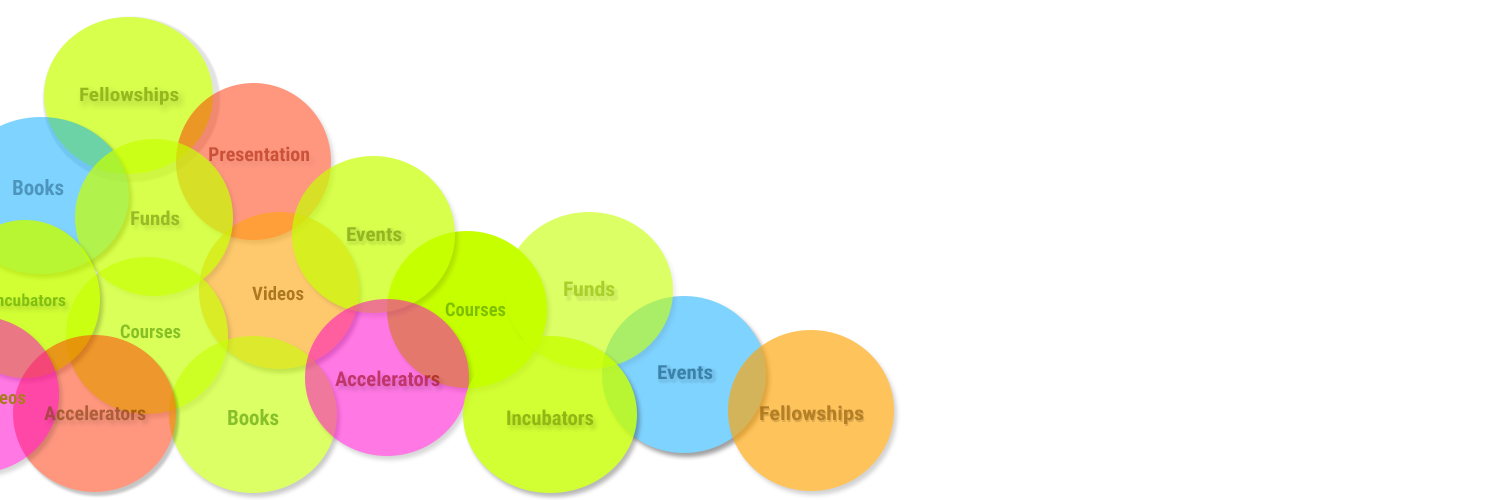
<style>
.page{position:relative;width:1500px;height:500px;background:#ffffff}
.page>*{position:absolute;margin:0}
.t1{font:18.6px "RobotoCondensed-Bold";color:#96b81d;scale:1.14 1}
.t2{font:19.5px "RobotoCondensed-Bold";color:#cc5139}
.t3{font:21.3px "RobotoCondensed-Bold";color:#4c95bc}
.t4{font:19.3px "RobotoCondensed-Bold";color:#99bb25;scale:1.08 1}
.t5{font:19.5px "RobotoCondensed-Bold";color:#94b620;scale:1.08 1}
.t6{font:20.2px "RobotoCondensed-Bold";color:#a9cf2b;scale:1.07 1}
.t7{font:18.6px "RobotoCondensed-Bold";color:#ad7920}
.t8{font:18.6px "RobotoCondensed-Bold";color:#7ec000}
.t9{font:18.6px "RobotoCondensed-Bold";color:#86c024}
.t10{font:19.5px "RobotoCondensed-Bold";color:#3982ab;scale:1.08 1}
.t11{font:20.4px "RobotoCondensed-Bold";color:#c13568}
.t12{font:19.5px "RobotoCondensed-Bold";color:#ae5f37}
.t13{font:21.3px "RobotoCondensed-Bold";color:#87c02a}
.t14{font:20.4px "RobotoCondensed-Bold";color:#92b713}
.t15{font:19.5px "RobotoCondensed-Bold";color:#b47f25;scale:1.14 1}
</style>
<div class="page">
<p class="t1" style="left:80px;top:87px;width:99px;height:18px">Fellowships</p>
<p class="t2" style="left:209px;top:146px;width:100px;height:16px">Presentation</p>
<p class="t3" style="left:13px;top:179px;width:51px;height:17px">Books</p>
<p class="t4" style="left:131px;top:210px;width:49px;height:16px">Funds</p>
<p class="t5" style="left:347px;top:227px;width:55px;height:15px">Events</p>
<p class="t6" style="left:564px;top:280px;width:51px;height:17px">Funds</p>
<p class="t7" style="left:252px;top:286px;width:52px;height:15px">Videos</p>
<p class="t8" style="left:445px;top:302px;width:61px;height:15px">Courses</p>
<p class="t9" style="left:120px;top:324px;width:61px;height:15px">Courses</p>
<p class="t10" style="left:658px;top:365px;width:55px;height:15px">Events</p>
<p class="t11" style="left:335px;top:370px;width:105px;height:17px">Accelerators</p>
<p class="t12" style="left:44px;top:405px;width:102px;height:16px">Accelerators</p>
<p class="t13" style="left:228px;top:409px;width:51px;height:17px">Books</p>
<p class="t14" style="left:507px;top:409px;width:87px;height:17px">Incubators</p>
<p class="t15" style="left:760px;top:405px;width:104px;height:19px">Fellowships</p>
</div>
